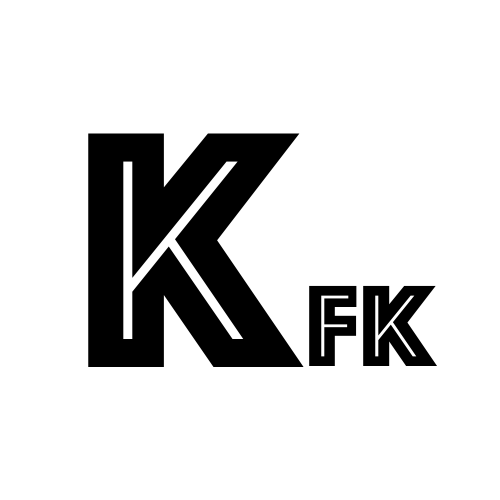
<style>
.page{position:relative;width:500px;height:500px;background:#ffffff}
.page>*{position:absolute;margin:0}
.t1{font:350px "Phosphate-Inline";color:#000000}
.t2{font:120px "Phosphate-Inline";color:#000000}
</style>
<div class="page">
<p class="t1" style="left:88px;top:133px;width:216px;height:234px">k</p>
<p class="t2" style="left:309px;top:285px;width:128px;height:81px">fk</p>
</div>
